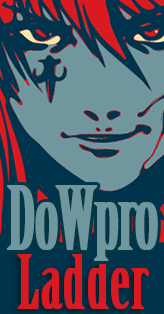
<style>
.page{position:relative;width:164px;height:314px;background:#70969e}
.page>*{position:absolute;margin:0}
.t1{font:85px "BirchStd";letter-spacing:-0.05em;color:#70969e;font-weight:bold}
.t2{font:72px "BirchStd";color:#d91a21;font-weight:bold}
</style>
<div class="page">
<p class="t1" style="left:7px;top:185px;width:151px;height:76px">DoWpro</p>
<p class="t2" style="left:17px;top:254px;width:132px;height:55px">Ladder</p>
</div>
